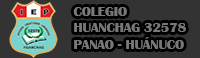
<style>
.page{position:relative;width:200px;height:58px;background:#333333}
.page>*{position:absolute;margin:0}
.t1{font:13.9px "BritannicBold";color:#787779}
</style>
<div class="page">
<p class="t1" style="left:73px;top:7px;width:113px;height:42px">COLEGIO <br>HUANCHAG 32578<br>PANAO - HUÁNUCO</p>
</div>
